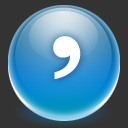
<style>
.page{position:relative;width:128px;height:128px;background:#333333}
.page>*{position:absolute;margin:0}
.t1{font:156px "Clarendon";color:#ffffff}
</style>
<div class="page">
<p class="t1" style="left:53px;top:36px;width:28px;height:43px">,</p>
</div>
